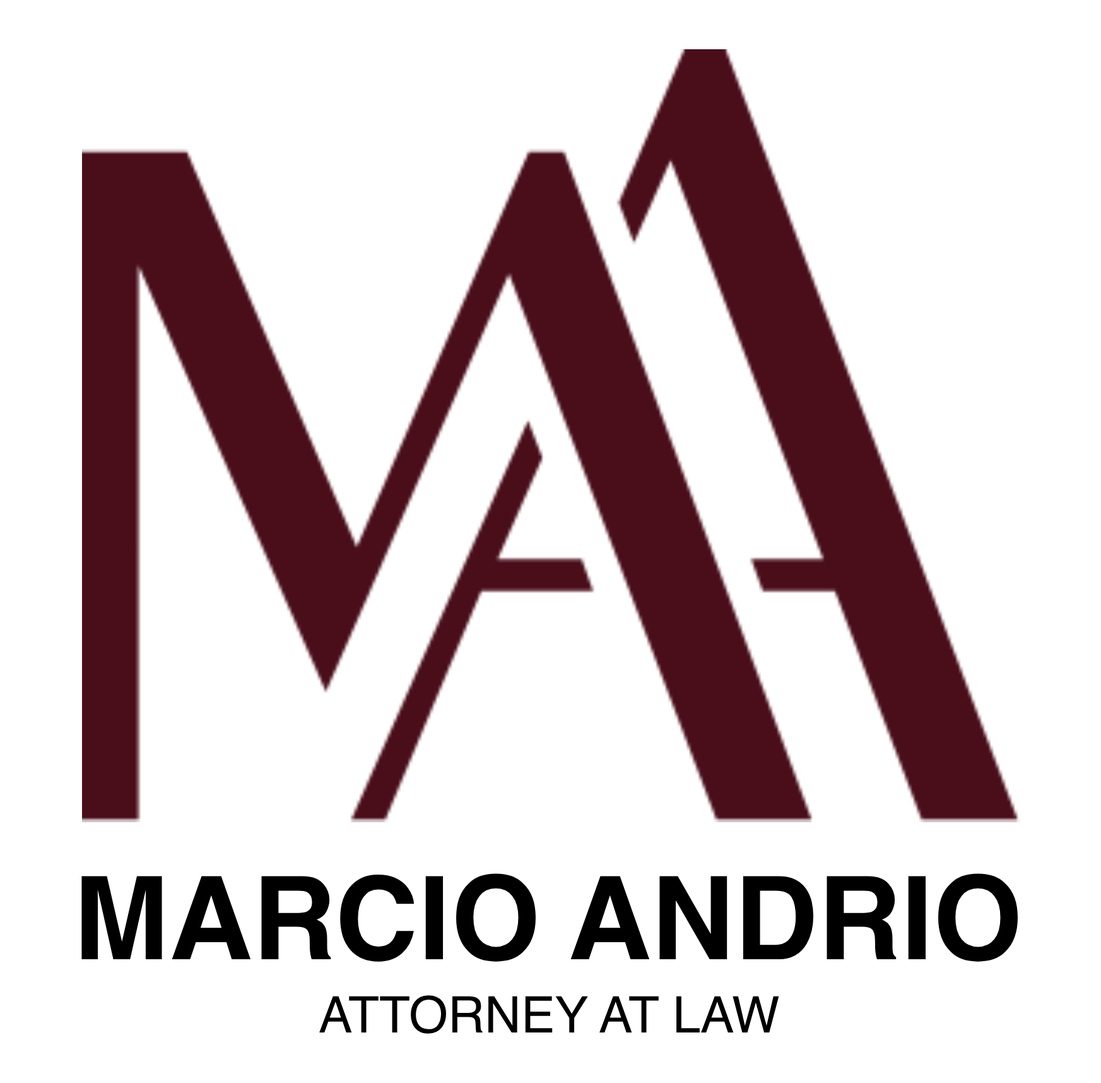
<style>
.page{position:relative;width:1101px;height:1083px;background:#ffffff}
.page>*{position:absolute;margin:0}
.t1{font:115.3px "Helvetica-Bold";color:#000000}
.t2{font:50.4px "Helvetica";color:#000000}
</style>
<div class="page">
<p class="t1" style="left:81px;top:873px;width:937px;height:88px">MARCIO ANDRIO</p>
<p class="t2" style="left:319px;top:995px;width:461px;height:38px">ATTORNEY AT LAW</p>
</div>
